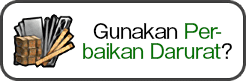
<style>
.page{position:relative;width:246px;height:81px;background:#ffffff}
.page>*{position:absolute;margin:0}
.t1{font:20px/20px "GothicMB101Pro-Regular";letter-spacing:-0.04em;color:#037302}
.t2{font:20px/20px "GothicMB101Pro-Regular";letter-spacing:-0.04em;color:#000000}
</style>
<div class="page">
<p class="t1" style="left:83px;top:23px;width:149px;height:36px;text-align:center"><span class="t2">Gunakan </span>Per-<br>baikan Darurat<span class="t2">?</span></p>
</div>
